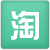
<style>
.page{position:relative;width:50px;height:50px}
.page>*{position:absolute;margin:0}
.t1{font:31.6px "ç»å¸ç»¼èºä½ç®-regular";letter-spacing:0.025em;color:#ffffff}
</style>
<div class="page">
<p class="t1" style="left:11px;top:11px;width:28px;height:29px">淘</p>
</div>
